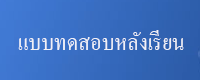
<style>
.page{position:relative;width:200px;height:80px}
.page>*{position:absolute;margin:0}
.t1{font:30.1px "AngsanaNew";color:#f0f0f7;scale:0.94 1}
</style>
<div class="page">
<p class="t1" style="left:18px;top:30px;width:166px;height:20px">แบบทดสอบหลังเรียน</p>
</div>
